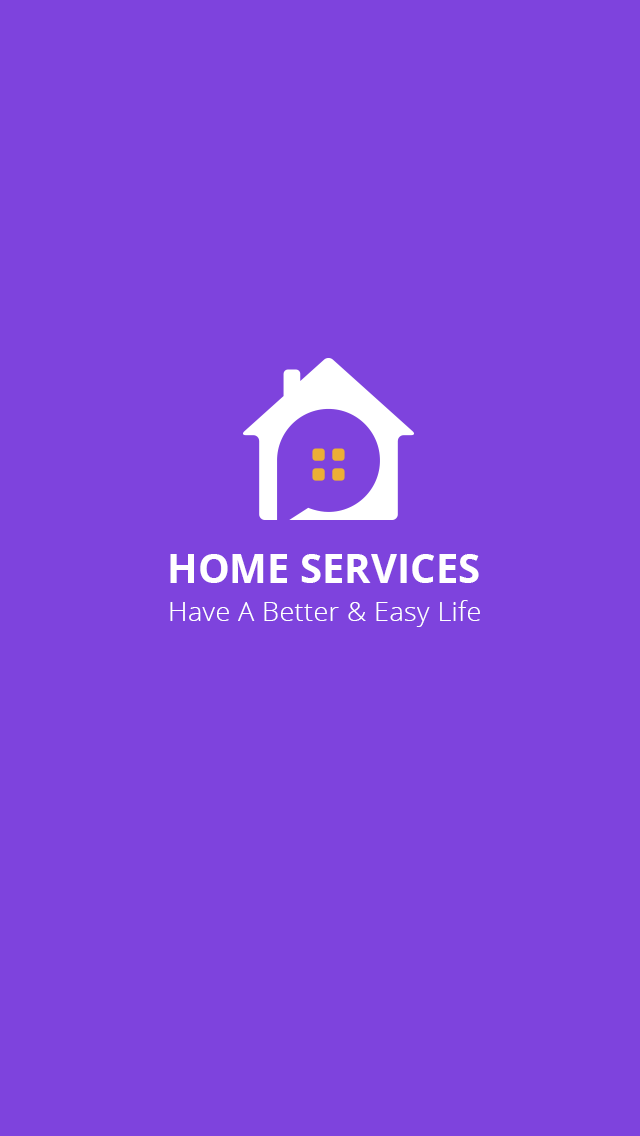
<style>
.page{position:relative;width:640px;height:1136px;background:#7e43dd}
.page>*{position:absolute;margin:0}
.t1{font:40px "OpenSans-Bold";color:#ffffff}
.t2{font:27px "OpenSans-Light";letter-spacing:0.015em;color:#ffffff}
</style>
<div class="page">
<p class="t1" style="left:170px;top:554px;width:309px;height:29px">HOME SERVICES</p>
<p class="t2" style="left:170px;top:600px;width:310px;height:27px">Have A Better &amp; Easy Life</p>
</div>
